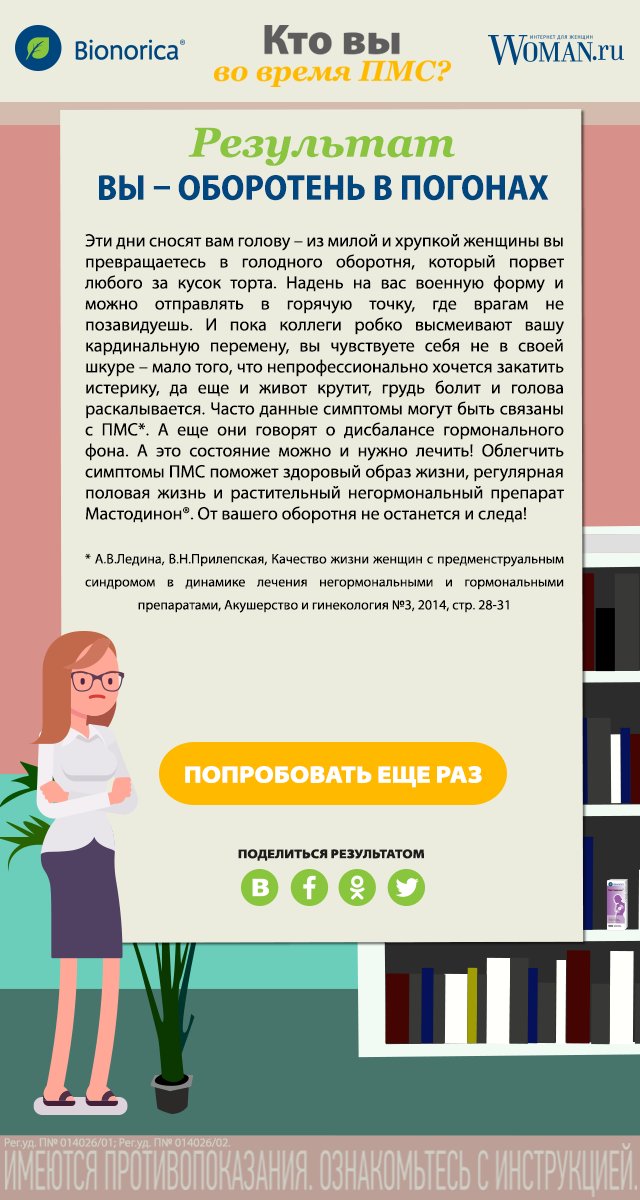
<style>
.page{position:relative;width:640px;height:1200px;background:#ececde}
.page>*{position:absolute;margin:0}
.t1{font:41.5px "Georgia-BoldItalic";color:#8bc53f}
.t2{font:36px "MyriadPro-BoldSemiCn";color:#00467f;text-transform:uppercase}
.t3{font:18px/21px "MyriadPro-Regular";color:#000000}
.t4{font:14px/23px "MyriadPro-Regular";color:#000000}
.t5{font:24px "MyriadPro-BlackSemiExt";color:#ffffff;text-transform:uppercase}
.t6{font:12.9px "MyriadPro-BlackSemiExt";color:#1d1d1b;text-transform:uppercase}
.t7{font:12px "MyriadPro-Regular";color:#cecec4}
</style>
<div class="page">
<p class="t1" style="left:188px;top:127px;width:267px;height:39px">Результат</p>
<p class="t2" style="left:99px;top:175px;width:450px;height:26px">Вы – оборотень в погонах</p>
<p class="t3" style="left:85px;top:234px;width:479px;height:379px;text-align:justify">Эти дни сносят вам голову – из милой и хрупкой женщины вы превращаетесь в голодного оборотня, который порвет любого за кусок торта. Надень на вас военную форму и можно отправлять в горячую точку, где врагам не позавидуешь. И пока коллеги робко высмеивают вашу кардинальную перемену, вы чувствуете себя не в своей шкуре – мало того, что непрофессионально хочется закатить истерику, да еще и живот крутит, грудь болит и голова раскалывается. Часто данные симптомы могут быть связаны с ПМС*. А еще они говорят о дисбалансе гормонального фона. А это состояние можно и нужно лечить! Облегчить симптомы ПМС поможет здоровый образ жизни, регулярная половая жизнь и растительный негормональный препарат Мастодинон®. От вашего оборотня не останется и следа!<br><br><span class="t4">* А.В.Ледина, В.Н.Прилепская, Качество жизни женщин с предменструальным синдромом в динамике лечения негормональными и гормональными препаратами, Акушерство и гинекология №3, 2014, стр. 28-31</span></p>
<p class="t5" style="left:185px;top:766px;width:297px;height:22px">попробовать еще раз</p>
<p class="t6" style="left:238px;top:849px;width:186px;height:12px">поделиться результатом</p>
<p class="t7" style="left:4px;top:1138px;width:227px;height:12px">Рег.уд. П№ 014026/01; Рег.уд. П№ 014026/02.</p>
</div>
